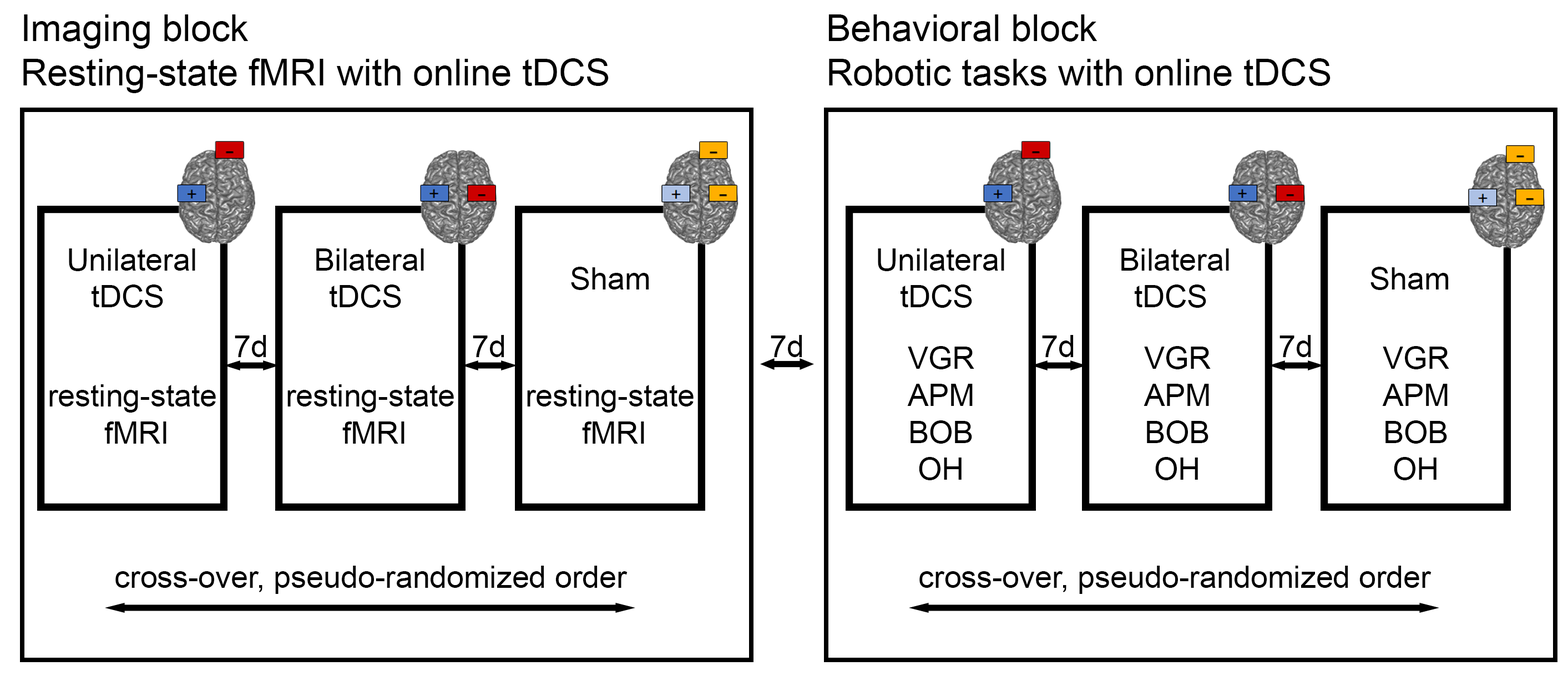
<style>
.page{position:relative;width:1568px;height:681px;background:#ffffff}
.page>*{position:absolute;margin:0}
.t1{font:37px "ArialMT";color:#000000}
.t2{font:30.8px "ArialMT";color:#000000}
</style>
<div class="page">
<p class="t1" style="left:23px;top:14px;width:586px;height:79px">Imaging block <br>Resting-state fMRI with online tDCS</p>
<p class="t1" style="left:828px;top:14px;width:503px;height:72px">Behavioral block <br>Robotic tasks with online tDCS</p>
<p class="t2" style="left:69px;top:249px;width:126px;height:59px;text-align:center">Unilateral<br> tDCS</p>
<p class="t2" style="left:316px;top:249px;width:108px;height:59px;text-align:center">Bilateral<br> tDCS</p>
<p class="t2" style="left:878px;top:249px;width:126px;height:59px;text-align:center">Unilateral<br> tDCS</p>
<p class="t2" style="left:1121px;top:249px;width:108px;height:59px;text-align:center">Bilateral<br> tDCS</p>
<p class="t2" style="left:571px;top:267px;width:78px;height:23px">Sham</p>
<p class="t2" style="left:1370px;top:267px;width:79px;height:23px">Sham</p>
<p class="t2" style="left:235px;top:335px;width:31px;height:22px">7d</p>
<p class="t2" style="left:473px;top:335px;width:31px;height:22px">7d</p>
<p class="t2" style="left:771px;top:335px;width:31px;height:22px">7d</p>
<p class="t2" style="left:1042px;top:335px;width:32px;height:22px">7d</p>
<p class="t2" style="left:1279px;top:335px;width:32px;height:22px">7d</p>
<p class="t2" style="left:907px;top:346px;width:67px;height:134px;text-align:center">VGR<br>APM<br>BOB<br>OH</p>
<p class="t2" style="left:1144px;top:346px;width:67px;height:134px;text-align:center">VGR<br>APM<br>BOB<br>OH</p>
<p class="t2" style="left:1382px;top:346px;width:67px;height:134px;text-align:center">VGR<br>APM<br>BOB<br>OH</p>
<p class="t2" style="left:49px;top:385px;width:167px;height:59px;text-align:center">resting-state<br> fMRI</p>
<p class="t2" style="left:287px;top:385px;width:167px;height:59px;text-align:center">resting-state<br> fMRI</p>
<p class="t2" style="left:527px;top:385px;width:167px;height:59px;text-align:center">resting-state<br> fMRI</p>
<p class="t2" style="left:115px;top:566px;width:513px;height:28px">cross-over, pseudo-randomized order</p>
<p class="t2" style="left:919px;top:566px;width:513px;height:28px">cross-over, pseudo-randomized order</p>
</div>
